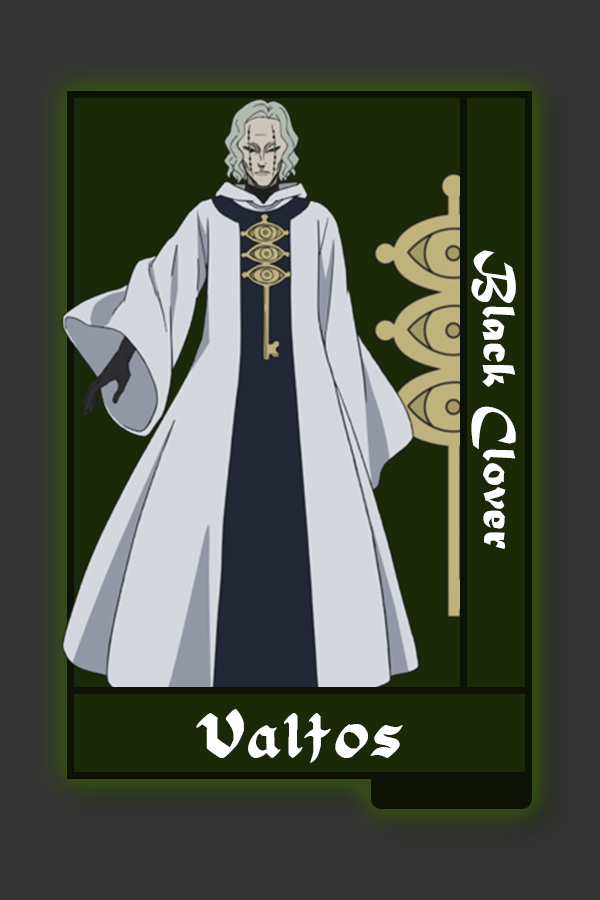
<style>
.page{position:relative;width:600px;height:900px;background:#1b2908}
.page>*{position:absolute;margin:0}
.t1{font:48.8px "MaturaMTScriptCapitals";color:#ffffff}
.t2{font:54.8px "FloranteatLaura";color:#ffffff}
</style>
<div class="page">
<p class="t1" style="left:471px;top:250px;width:45px;height:299px;rotate:90deg">Black Clover</p>
<p class="t2" style="left:196px;top:709px;width:207px;height:54px">Valtos</p>
</div>
